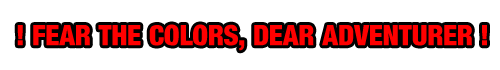
<style>
.page{position:relative;width:500px;height:70px;background:#ffffff}
.page>*{position:absolute;margin:0}
.t1{font:28px "Harvest";color:#ff0000}
</style>
<div class="page">
<p class="t1" style="left:17px;top:24px;width:470px;height:27px">! FEAR THE COLORS, DEAR ADVENTURER !</p>
</div>
